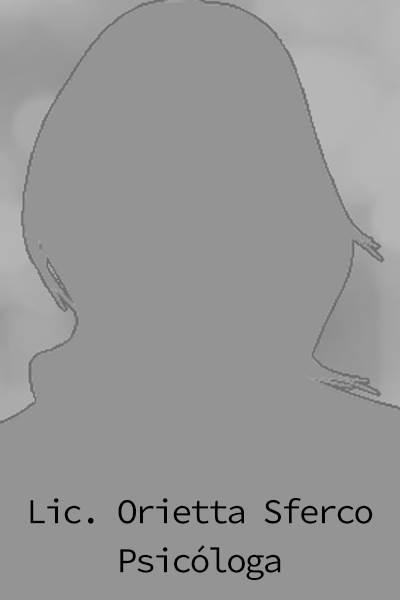
<style>
.page{position:relative;width:400px;height:600px;background:#949494}
.page>*{position:absolute;margin:0}
.t1{font:35px/49px "SourceCodePro-Regular";letter-spacing:-0.08em;color:#000000}
</style>
<div class="page">
<p class="t1" style="left:30px;top:498px;width:343px;height:82px;text-align:center">Lic. Orietta Sferco<br>Psicóloga</p>
</div>
